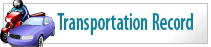
<style>
.page{position:relative;width:211px;height:47px;background:#ffffff}
.page>*{position:absolute;margin:0}
.t1{font:24px "MyriadPro-SemiboldCond";color:#11839a;scale:0.78 1}
</style>
<div class="page">
<p class="t1" style="left:57px;top:13px;width:136px;height:22px">Transportation Record</p>
</div>
